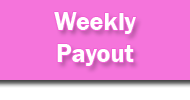
<style>
.page{position:relative;width:190px;height:100px;background:#f574db}
.page>*{position:absolute;margin:0}
.t1{font:26px "FranklinGothic-Demi";color:#ffffff}
</style>
<div class="page">
<p class="t1" style="left:54px;top:12px;width:82px;height:54px;text-align:center">Weekly <br>Payout</p>
</div>
